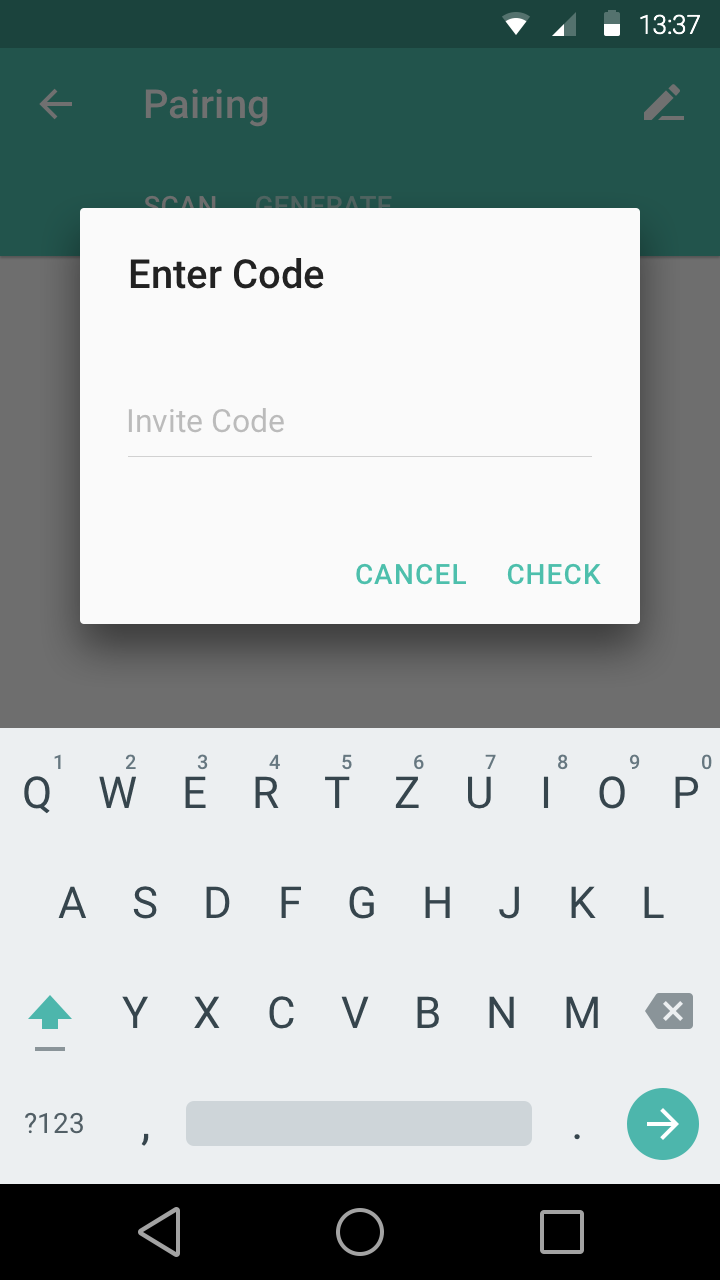
<style>
.page{position:relative;width:720px;height:1280px;background:#eceff1}
.page>*{position:absolute;margin:0}
.t1{font:40px "Roboto-Medium";color:#707070}
.t2{font:40px "Roboto-Medium";color:#222222}
.t3{font:32px "Roboto-Regular";color:#bbbbbb}
.t4{font:28px "Roboto-Medium";letter-spacing:0.04em;color:#4dbfac;text-transform:uppercase}
</style>
<div class="page">
<p class="t1" style="left:145px;top:88px;width:123px;height:39px">Pairing</p>
<p class="t2" style="left:130px;top:258px;width:194px;height:31px">Enter Code</p>
<p class="t3" style="left:128px;top:408px;width:156px;height:25px">Invite Code</p>
<p class="t4" style="left:356px;top:563px;width:110px;height:22px">Cancel</p>
<p class="t4" style="left:507px;top:563px;width:94px;height:22px">Check</p>
</div>
